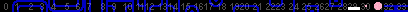
<style>
.page{position:relative;width:408px;height:12px;background:#000000}
.page>*{position:absolute;margin:0}
.t1{font:9.5px "Arial-BoldMT";color:#525051;scale:0.94 1}
</style>
<div class="page">
<p class="t1" style="left:4px;top:3px;width:402px;height:7px">0  1   2  3  4   5  6  7   8  9  10 1112 1314 15 1617 18 1920 21 2223 24 25 2627 2829 30 3132 33</p>
</div>
